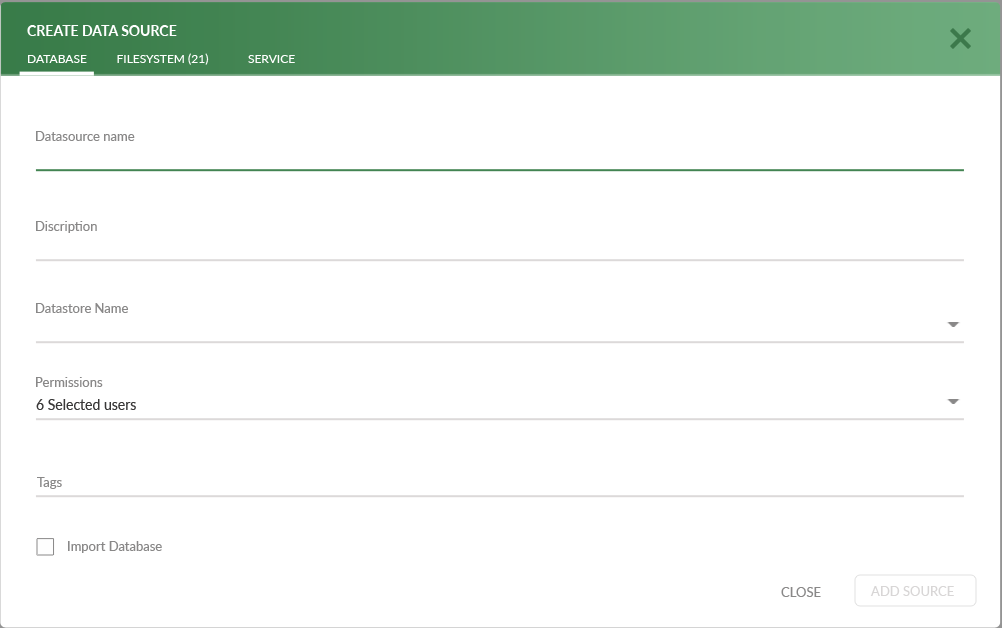
<style>
.page{position:relative;width:1002px;height:632px;background:#ffffff}
.page>*{position:absolute;margin:0}
.t1{font:14px "Lato-Bold";color:#ffffff}
.t2{font:12px "Lato-Regular";color:#ffffff}
.t3{font:13px "Lato-Regular";color:#898888}
.t4{font:14px "Lato-Regular";color:#393838}
.t5{font:13px "Lato-Regular";color:#d8d6d6}
</style>
<div class="page">
<p class="t1" style="left:27px;top:25px;width:150px;height:11px">CREATE DATA SOURCE</p>
<p class="t2" style="left:117px;top:53px;width:92px;height:12px">FILESYSTEM (21)</p>
<p class="t2" style="left:28px;top:55px;width:59px;height:8px">DATABASE</p>
<p class="t2" style="left:248px;top:55px;width:47px;height:8px">SERVICE</p>
<p class="t3" style="left:36px;top:131px;width:99px;height:10px">Datasource name</p>
<p class="t3" style="left:36px;top:221px;width:61px;height:12px">Discription</p>
<p class="t3" style="left:36px;top:303px;width:92px;height:10px">Datastore Name</p>
<p class="t3" style="left:36px;top:377px;width:67px;height:10px">Permissions</p>
<p class="t4" style="left:36px;top:399px;width:100px;height:11px">6 Selected users</p>
<p class="t3" style="left:37px;top:477px;width:25px;height:12px">Tags</p>
<p class="t3" style="left:68px;top:541px;width:94px;height:12px">Import Database</p>
<p class="t3" style="left:781px;top:587px;width:40px;height:10px">CLOSE</p>
<p class="t5" style="left:870px;top:586px;width:84px;height:10px">ADD SOURCE</p>
</div>
